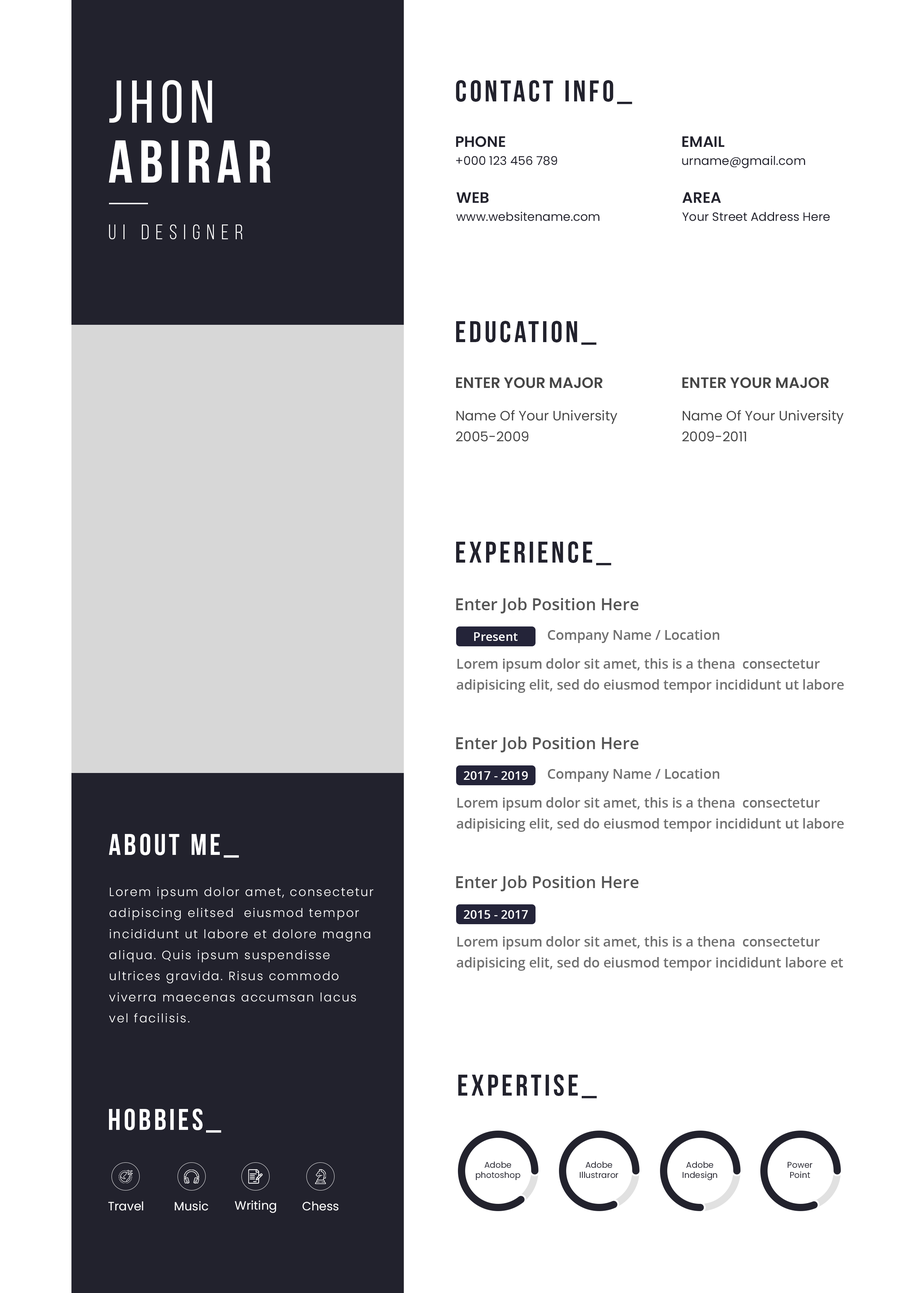
<style>
.page{position:relative;width:922px;height:1293px;background:#ffffff}
.page>*{position:absolute;margin:0}
.t1{font:60.2px/60.2px "BebasNeue-Bold";letter-spacing:0.1em;color:#ffffff}
.t2{font:60.2px/60.2px "BebasNeue-Regular";letter-spacing:0.1em;color:#ffffff}
.t3{font:30.1px "BebasNeue-Bold";letter-spacing:0.1em;color:#22222d}
.t4{font:12px/18px "Poppins-Regular";color:#22222d}
.t5{font:15px/18px "Poppins-SemiBold";color:#22222d;text-transform:uppercase}
.t6{font:21.1px "BebasNeue-Book";letter-spacing:0.3em;color:#ffffff}
.t7{font:15px "Poppins-SemiBold";color:#464646;text-transform:uppercase}
.t8{font:13.5px/21.1px "Poppins-Regular";color:#464646}
.t9{font:16.5px "OpenSans-Semibold";color:#555555}
.t10{font:13.5px "OpenSans-Semibold";color:#707070}
.t11{font:12px "OpenSans-Semibold";color:#ffffff}
.t12{font:13.5px/21.1px "OpenSans-Semibold";color:#707070}
.t13{font:30.1px "BebasNeue-Bold";letter-spacing:0.1em;color:#ffffff}
.t14{font:12px/21.1px "Poppins-Light";letter-spacing:0.1em;color:#ffffff}
.t15{font:8.4px "Poppins-Regular";color:#22222d}
.t16{font:12px "Poppins-Regular";color:#ffffff}
</style>
<div class="page">
<p class="t1" style="left:109px;top:80px;width:162px;height:103px"><span class="t2">jhon<br></span>abirar</p>
<p class="t3" style="left:456px;top:80px;width:176px;height:24px">contact info_</p>
<p class="t4" style="left:456px;top:136px;width:101px;height:29px"><span class="t5">Phone<br></span>+000 123 456 789</p>
<p class="t4" style="left:682px;top:136px;width:123px;height:32px"><span class="t5">email<br></span>urname@gmail.com</p>
<p class="t4" style="left:456px;top:192px;width:143px;height:29px"><span class="t5">web<br></span>www.websitename.com</p>
<p class="t4" style="left:682px;top:192px;width:148px;height:29px"><span class="t5">area<br></span>Your Street Address Here</p>
<p class="t6" style="left:109px;top:224px;width:134px;height:15px">ui designer</p>
<p class="t3" style="left:456px;top:321px;width:141px;height:24px">education_</p>
<p class="t7" style="left:456px;top:377px;width:147px;height:11px">Enter your major</p>
<p class="t7" style="left:682px;top:377px;width:147px;height:11px">Enter your major</p>
<p class="t8" style="left:456px;top:410px;width:162px;height:31px">Name Of Your University<br>2005-2009</p>
<p class="t8" style="left:682px;top:410px;width:162px;height:31px">Name Of Your University<br>2009-2011</p>
<p class="t3" style="left:456px;top:541px;width:155px;height:25px">experience_</p>
<p class="t9" style="left:456px;top:598px;width:183px;height:16px">Enter Job Position Here</p>
<p class="t10" style="left:548px;top:630px;width:172px;height:13px">Company Name / Location</p>
<p class="t11" style="left:474px;top:632px;width:44px;height:9px">Present</p>
<p class="t12" style="left:457px;top:658px;width:387px;height:35px">Lorem ipsum dolor sit amet, this is a thena  consectetur adipisicing elit, sed do eiusmod tempor incididunt ut labore</p>
<p class="t9" style="left:456px;top:737px;width:183px;height:15px">Enter Job Position Here</p>
<p class="t11" style="left:464px;top:771px;width:64px;height:9px">2017 - 2019</p>
<p class="t10" style="left:548px;top:769px;width:172px;height:13px">Company Name / Location</p>
<p class="t12" style="left:457px;top:797px;width:387px;height:35px">Lorem ipsum dolor sit amet, this is a thena  consectetur adipisicing elit, sed do eiusmod tempor incididunt ut labore</p>
<p class="t13" style="left:109px;top:834px;width:130px;height:24px">about me_</p>
<p class="t9" style="left:456px;top:876px;width:183px;height:15px">Enter Job Position Here</p>
<p class="t14" style="left:109px;top:887px;width:265px;height:136px">Lorem ipsum dolor amet, consectetur adipiscing elitsed  eiusmod tempor incididunt ut labore et dolore magna aliqua. Quis ipsum suspendisse ultrices gravida. Risus commodo viverra maecenas accumsan lacus vel facilisis.</p>
<p class="t11" style="left:464px;top:910px;width:64px;height:9px">2015 - 2017</p>
<p class="t12" style="left:457px;top:936px;width:386px;height:35px">Lorem ipsum dolor sit amet, this is a thena  consectetur adipisicing elit, sed do eiusmod tempor incididunt labore et dolore</p>
<p class="t3" style="left:458px;top:1074px;width:139px;height:25px">expertise_</p>
<p class="t13" style="left:109px;top:1109px;width:112px;height:24px">hobbies_</p>
<p class="t15" style="left:476px;top:1161px;width:44px;height:19px;text-align:center">Adobe<br>photoshop</p>
<p class="t15" style="left:580px;top:1161px;width:38px;height:17px;text-align:center">Adobe<br>Illustraror</p>
<p class="t15" style="left:682px;top:1161px;width:35px;height:20px;text-align:center">Adobe<br>Indesign</p>
<p class="t15" style="left:788px;top:1162px;width:24px;height:16px;text-align:center">Power<br>Point</p>
<p class="t16" style="left:108px;top:1201px;width:35px;height:10px">Travel</p>
<p class="t16" style="left:175px;top:1201px;width:33px;height:10px">Music</p>
<p class="t16" style="left:235px;top:1200px;width:41px;height:13px">Writing</p>
<p class="t16" style="left:302px;top:1201px;width:37px;height:10px">Chess</p>
</div>
